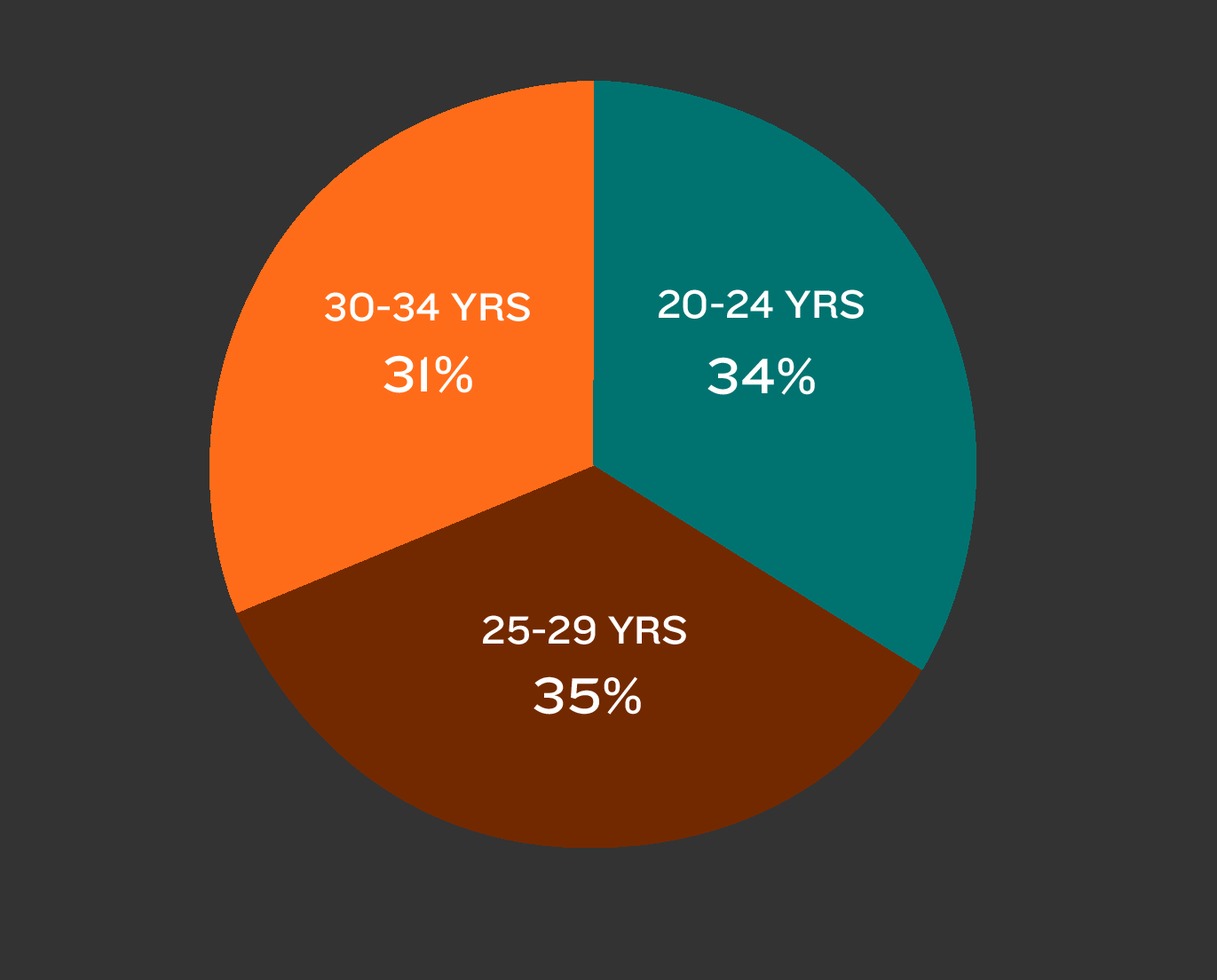
<style>
.page{position:relative;width:1217px;height:980px;background:#333333}
.page>*{position:absolute;margin:0}
.t1{font:40.7px "Knockout-HTF32-JuniorCruiserwt";color:#ffffff;text-transform:uppercase}
.t2{font:51.8px "Knockout-HTF33-JuniorHeviwt";color:#ffffff;text-transform:uppercase}
</style>
<div class="page">
<p class="t1" style="left:325px;top:292px;width:205px;height:29px">30-34 yrs</p>
<p class="t1" style="left:659px;top:289px;width:205px;height:30px">20-24 yrs</p>
<p class="t2" style="left:383px;top:355px;width:89px;height:38px">31%</p>
<p class="t2" style="left:707px;top:357px;width:108px;height:38px">34%</p>
<p class="t1" style="left:483px;top:615px;width:203px;height:29px">25-29 yrs</p>
<p class="t2" style="left:533px;top:676px;width:108px;height:39px">35%</p>
</div>
